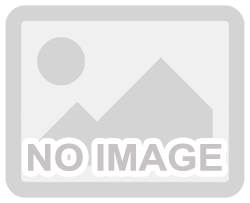
<style>
.page{position:relative;width:250px;height:203px;background:#d4d4d4}
.page>*{position:absolute;margin:0}
.t1{font:36.9px "Arial-BoldMT";color:#c9c4c4;scale:1.06 1}
</style>
<div class="page">
<p class="t1" style="left:28px;top:143px;width:194px;height:28px">NO IMAGE</p>
</div>
